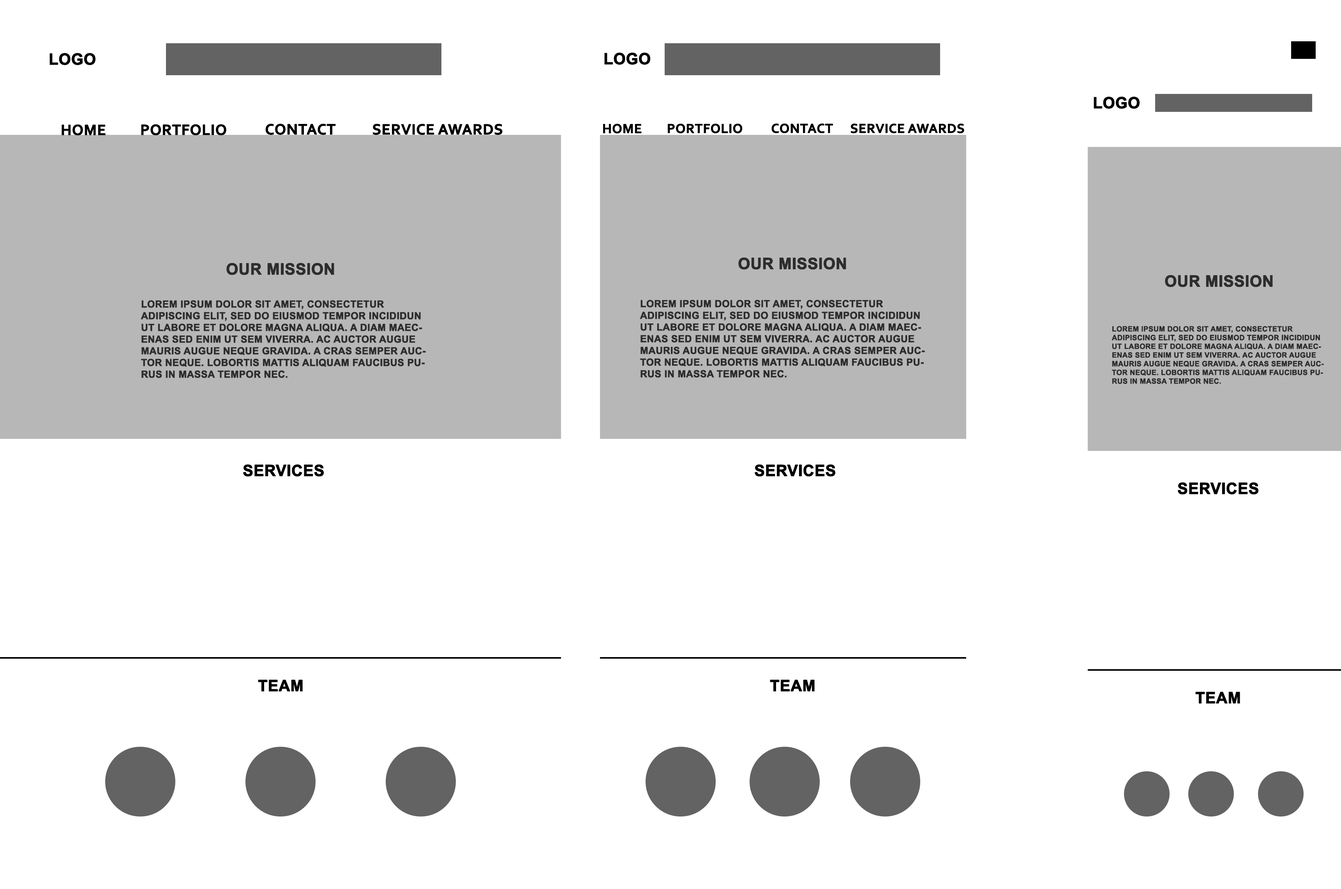
<style>
.page{position:relative;width:1341px;height:889px;background:#ffffff}
.page>*{position:absolute;margin:0}
.t1{font:15.6px "Arial-BoldMT";color:#000000;text-transform:uppercase;font-weight:bold}
.t2{font:15.6px "Corbel-Bold";color:#000000;text-transform:uppercase;font-weight:bold}
.t3{font:13.6px "Corbel-Bold";color:#000000;text-transform:uppercase;font-weight:bold}
.t4{font:15.6px "Arial-BoldMT";color:#2d2d2d;text-transform:uppercase;font-weight:bold}
.t5{font:9.7px "Arial-BoldMT";color:#2d2d2d;text-transform:uppercase;font-weight:bold}
.t6{font:7.3px "Arial-BoldMT";color:#2d2d2d;text-transform:uppercase;font-weight:bold}
</style>
<div class="page">
<p class="t1" style="left:49px;top:53px;width:46px;height:12px">Logo</p>
<p class="t1" style="left:604px;top:53px;width:46px;height:12px">Logo</p>
<p class="t1" style="left:1094px;top:97px;width:46px;height:12px">Logo</p>
<p class="t2" style="left:62px;top:124px;width:44px;height:12px">Home</p>
<p class="t2" style="left:141px;top:124px;width:85px;height:12px">PortFolio</p>
<p class="t2" style="left:265px;top:124px;width:71px;height:11px">Contact</p>
<p class="t2" style="left:373px;top:124px;width:130px;height:11px">Service Awards</p>
<p class="t3" style="left:603px;top:124px;width:39px;height:10px">Home</p>
<p class="t3" style="left:668px;top:124px;width:75px;height:10px">PortFolio</p>
<p class="t3" style="left:772px;top:124px;width:61px;height:9px">Contact</p>
<p class="t3" style="left:851px;top:124px;width:114px;height:9px">Service Awards</p>
<p class="t4" style="left:739px;top:257px;width:107px;height:13px">Our Mission</p>
<p class="t4" style="left:226px;top:263px;width:108px;height:12px">Our Mission</p>
<p class="t4" style="left:1165px;top:275px;width:108px;height:12px">Our Mission</p>
<p class="t5" style="left:141px;top:300px;width:285px;height:78px">Lorem ipsum dolor sit amet, consectetur <br>adipiscing elit, sed do eiusmod tempor incididun<br>ut labore et dolore magna aliqua. A diam maec-<br>enas sed enim ut sem viverra. Ac auctor augue <br>mauris augue neque gravida. A cras semper auc-<br>tor neque. Lobortis mattis aliquam faucibus pu-<br>rus in massa tempor nec.</p>
<p class="t5" style="left:640px;top:300px;width:285px;height:78px">Lorem ipsum dolor sit amet, consectetur <br>adipiscing elit, sed do eiusmod tempor incididun<br>ut labore et dolore magna aliqua. A diam maec-<br>enas sed enim ut sem viverra. Ac auctor augue <br>mauris augue neque gravida. A cras semper auc-<br>tor neque. Lobortis mattis aliquam faucibus pu-<br>rus in massa tempor nec.</p>
<p class="t6" style="left:1112px;top:326px;width:212px;height:58px">Lorem ipsum dolor sit amet, consectetur <br>adipiscing elit, sed do eiusmod tempor incididun<br>ut labore et dolore magna aliqua. A diam maec-<br>enas sed enim ut sem viverra. Ac auctor augue <br>mauris augue neque gravida. A cras semper auc-<br>tor neque. Lobortis mattis aliquam faucibus pu-<br>rus in massa tempor nec.</p>
<p class="t1" style="left:243px;top:464px;width:81px;height:13px">Services</p>
<p class="t1" style="left:755px;top:464px;width:81px;height:13px">Services</p>
<p class="t1" style="left:1178px;top:482px;width:81px;height:13px">Services</p>
<p class="t1" style="left:258px;top:680px;width:45px;height:11px">Team</p>
<p class="t1" style="left:770px;top:680px;width:45px;height:11px">Team</p>
<p class="t1" style="left:1196px;top:692px;width:44px;height:11px">Team</p>
</div>
